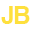
<style>
.page{position:relative;width:32px;height:32px;background:#ffffff}
.page>*{position:absolute;margin:0}
.t1{font:24.3px "Helvetica-Bold";letter-spacing:-0.06em;color:#fee03d;text-transform:uppercase}
</style>
<div class="page">
<p class="t1" style="left:1px;top:6px;width:29px;height:18px">Jb</p>
</div>
